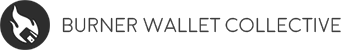
<style>
.page{position:relative;width:347px;height:50px;background:#ffffff}
.page>*{position:absolute;margin:0}
.t1{font:20px "Moon-Light";color:#3d3d3d}
</style>
<div class="page">
<p class="t1" style="left:62px;top:17px;width:279px;height:16px">Burner Wallet Collective</p>
</div>
